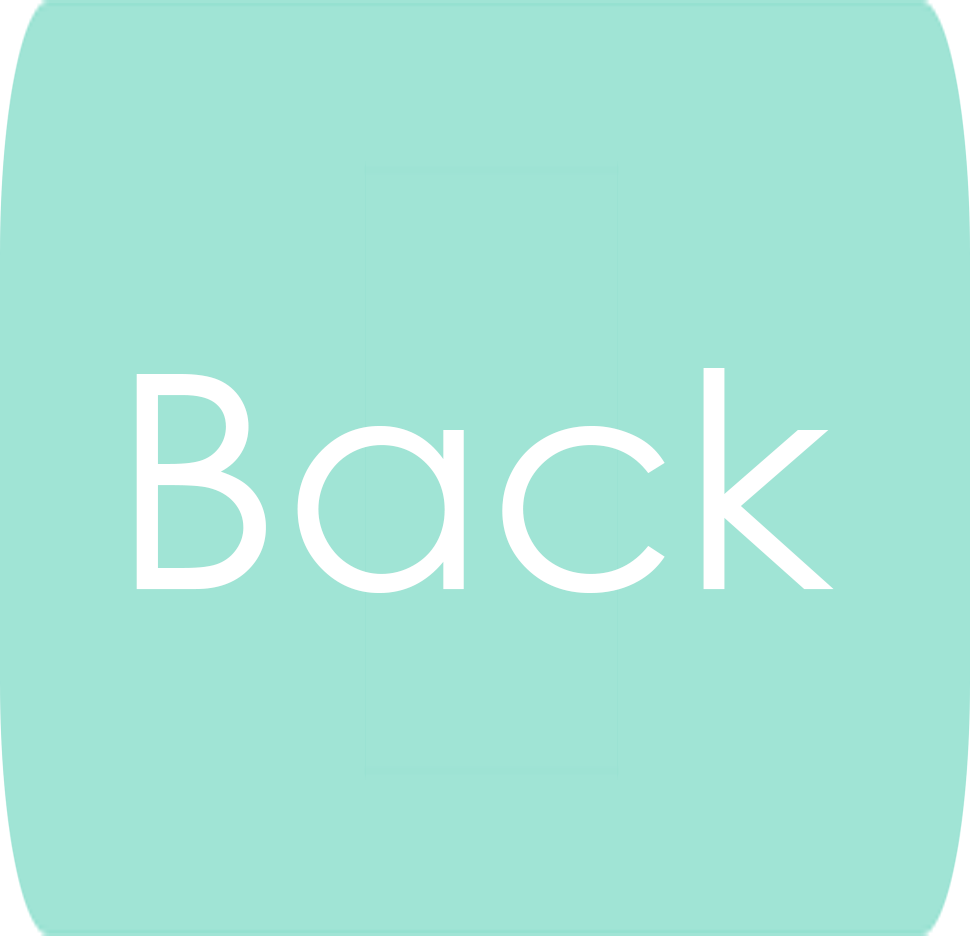
<style>
.page{position:relative;width:970px;height:936px;background:#a0e4d5}
.page>*{position:absolute;margin:0}
.t1{font:300px "CenturyGothic";color:#ffffff}
</style>
<div class="page">
<p class="t1" style="left:136px;top:368px;width:698px;height:225px">Back</p>
</div>
